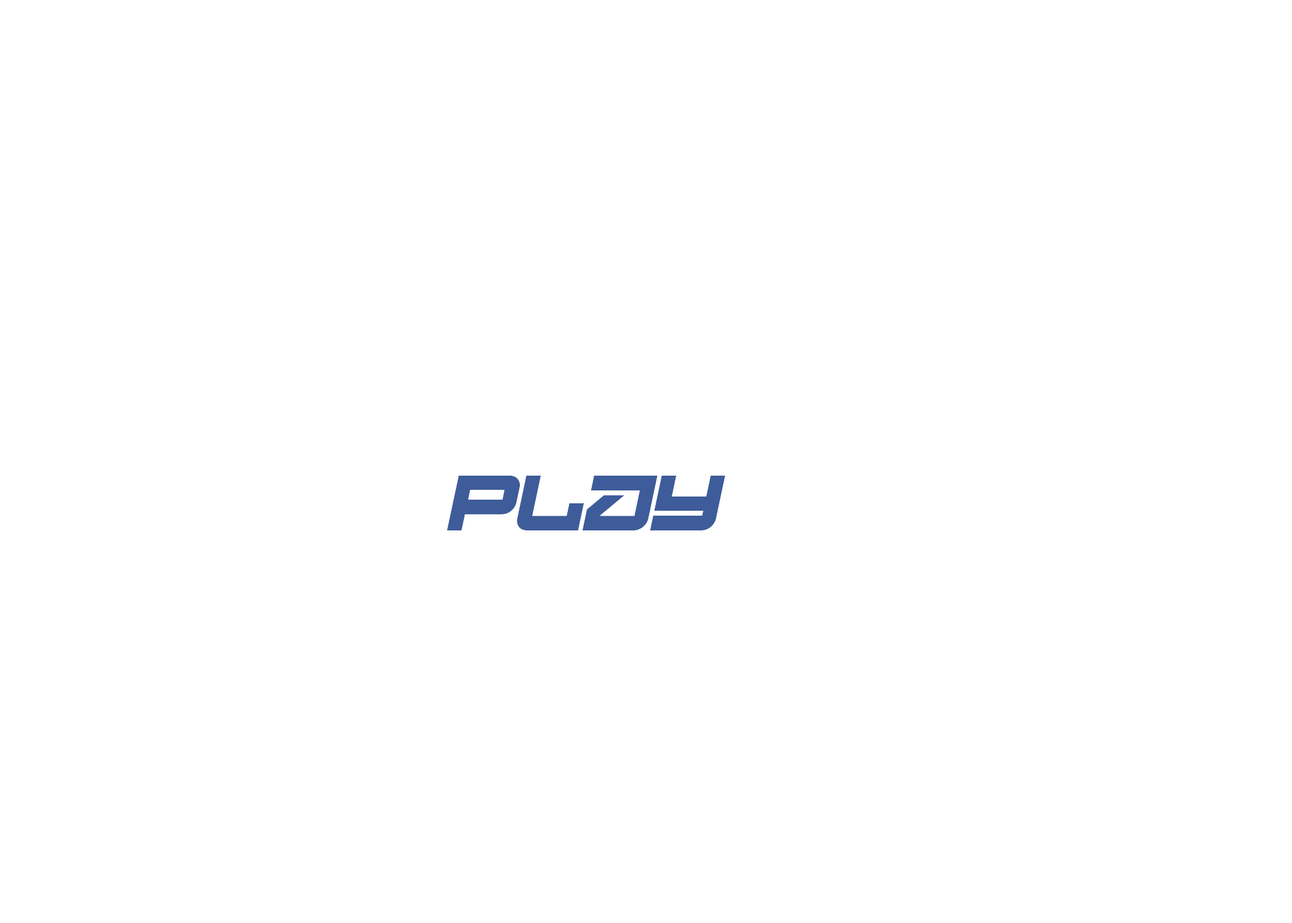
<style>
.page{position:relative;width:1292px;height:923px;background:#ffffff}
.page>*{position:absolute;margin:0}
.t1{font:76.9px "Onky-Italic";color:#3e5c9a}
</style>
<div class="page">
<p class="t1" style="left:447px;top:476px;width:278px;height:54px">PLAY</p>
</div>
